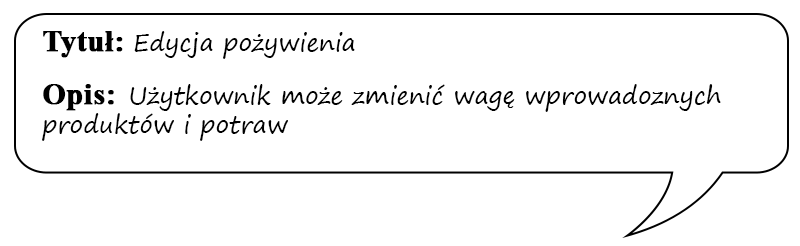
<style>
.page{position:relative;width:800px;height:246px;background:#ffffff}
.page>*{position:absolute;margin:0}
.t1{font:24px "SegoePrint";color:#000000}
.t2{font:30px "TimesNewRomanPS-BoldMT";color:#000000;font-weight:bold}
</style>
<div class="page">
<p class="t1" style="left:42px;top:31px;width:679px;height:110px"><span class="t2">Tytuł: </span>Edycja pożywienia<br><br><span class="t2">Opis:  </span>Użytkownik może zmienić wagę wprowadoznych produktów i potraw</p>
</div>
